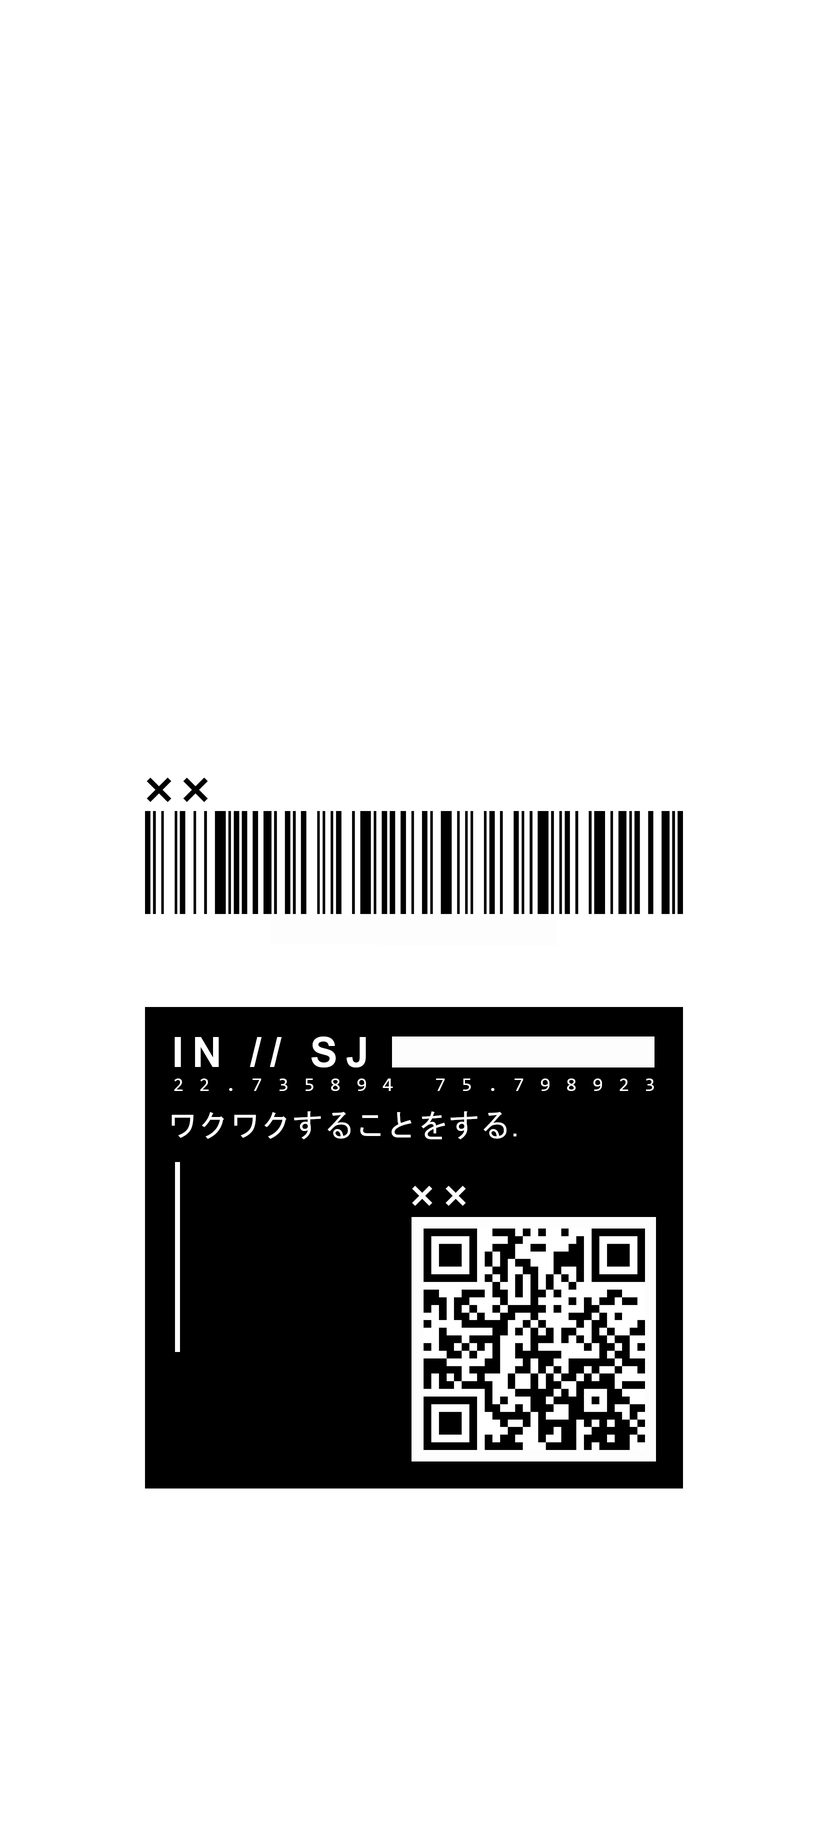
<style>
.page{position:relative;width:828px;height:1842px;background:#ffffff}
.page>*{position:absolute;margin:0}
.t1{font:9px "MicrosoftSansSerif";color:#000000}
.t2{font:6px "Arial-BoldMT";letter-spacing:0.2em;color:#ffffff}
.t3{font:19.6px "Consolas";letter-spacing:0.79em;color:#ffffff}
.t4{font:31.3px "MS-Gothic";color:#ffffff}
.t5{font:31.3px "SourceSansRoman-Bold";color:#ffffff}
.t6{font:7.3px "MicrosoftSansSerif";color:#ffffff}
</style>
<div class="page">
<p class="t1" style="left:147px;top:778px;width:25px;height:25px;rotate:45deg">+</p>
<p class="t1" style="left:183px;top:778px;width:25px;height:25px;rotate:45deg">+</p>
<p class="t2" style="left:175px;top:1037px;width:191px;height:31px">IN // SJ</p>
<p class="t3" style="left:174px;top:1079px;width:480px;height:12px">22.735894 75.798923</p>
<p class="t4" style="left:172px;top:1111px;width:345px;height:29px"><span class="t5"><br></span>ワクワクすることをする.</p>
<p class="t6" style="left:412px;top:1186px;width:21px;height:20px;rotate:45deg">+</p>
<p class="t6" style="left:446px;top:1186px;width:20px;height:20px;rotate:45deg">+</p>
</div>
